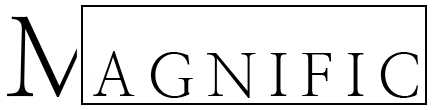
<style>
.page{position:relative;width:433px;height:110px;background:#ffffff}
.page>*{position:absolute;margin:0}
.t1{font:60px "NanumMyeongjo";letter-spacing:0.2em;color:#000000;text-transform:uppercase}
</style>
<div class="page">
<p class="t1" style="left:93px;top:51px;width:325px;height:47px">AGNIFIC</p>
</div>
